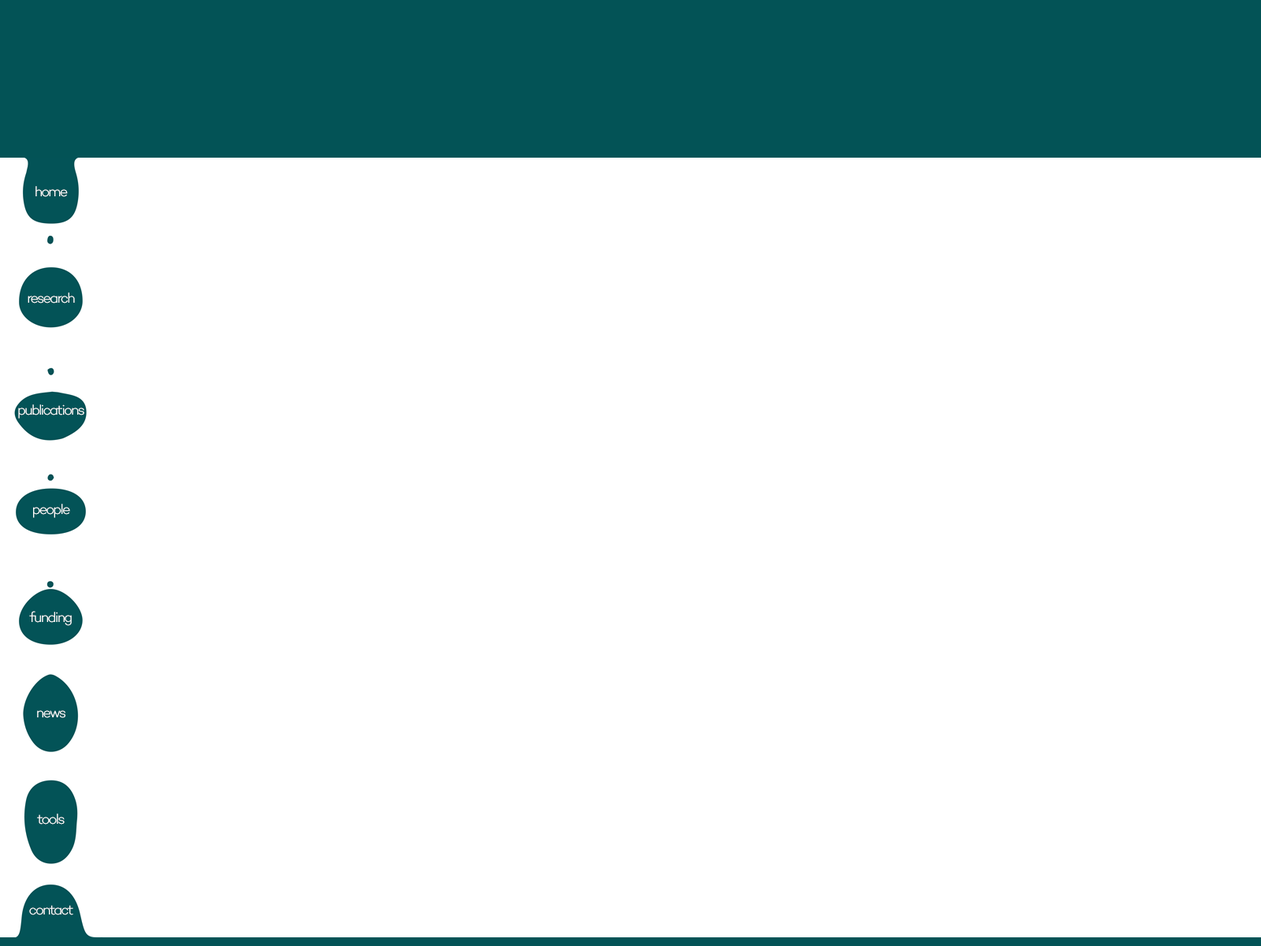
<style>
.page{position:relative;width:1261px;height:946px;background:#ffffff}
.page>*{position:absolute;margin:0}
.t1{font:14.2px "Campton-LightDEMO";letter-spacing:-0.1em;color:#ffffff}
</style>
<div class="page">
<p class="t1" style="left:35px;top:186px;width:33px;height:11px">home</p>
<p class="t1" style="left:28px;top:292px;width:47px;height:11px">research</p>
<p class="t1" style="left:18px;top:404px;width:66px;height:14px">publications</p>
<p class="t1" style="left:33px;top:504px;width:37px;height:14px">people</p>
<p class="t1" style="left:29px;top:611px;width:43px;height:15px">funding</p>
<p class="t1" style="left:37px;top:710px;width:28px;height:8px">news</p>
<p class="t1" style="left:37px;top:813px;width:28px;height:11px">tools</p>
<p class="t1" style="left:29px;top:905px;width:44px;height:10px">contact</p>
</div>
